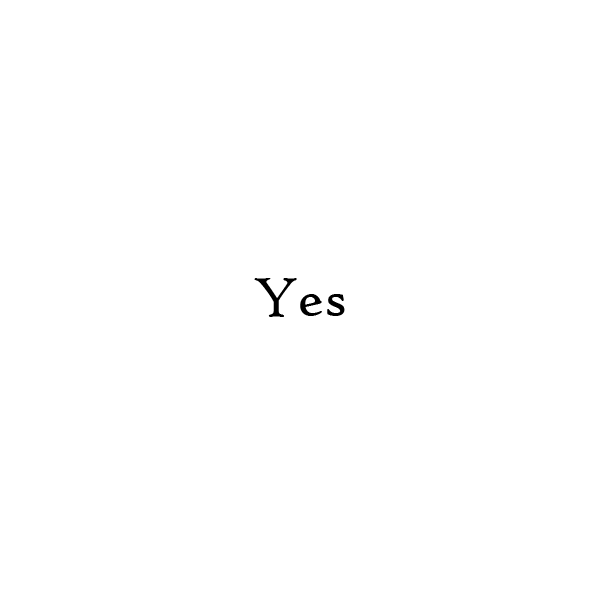
<style>
.page{position:relative;width:600px;height:600px;background:#ffffff}
.page>*{position:absolute;margin:0}
.t1{font:59.2px "HighTowerText-Reg";color:#000000}
</style>
<div class="page">
<p class="t1" style="left:254px;top:278px;width:91px;height:39px">Yes</p>
</div>
